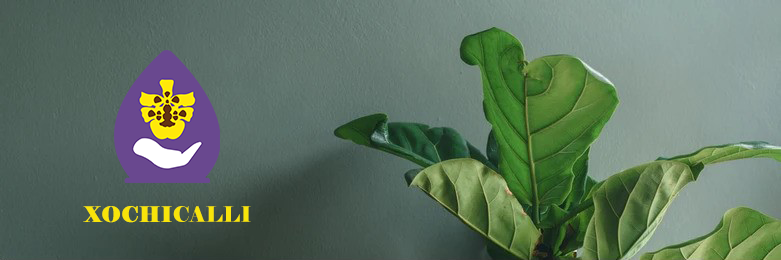
<style>
.page{position:relative;width:781px;height:260px}
.page>*{position:absolute;margin:0}
.t1{font:21.3px "Elephant-Regular";color:#f8e40a;font-weight:bold}
.t2{font:21.3px "Elephant-Regular";color:#f8e40a}
</style>
<div class="page">
<p class="t1" style="left:83px;top:206px;width:168px;height:17px">XOCHI<span class="t2">CALLI</span></p>
</div>
